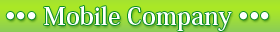
<style>
.page{position:relative;width:280px;height:32px}
.page>*{position:absolute;margin:0}
.t1{font:24px "KozMinPr6N-Bold";color:#ffffff}
</style>
<div class="page">
<p class="t1" style="left:6px;top:6px;width:263px;height:25px">••• Mobile Company •••</p>
</div>
